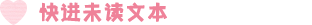
<style>
.page{position:relative;width:312px;height:25px;background:#ffffff}
.page>*{position:absolute;margin:0}
.t1{font:21.2px "shetumodengxiaofangti";color:#ef8299;font-weight:bold}
</style>
<div class="page">
<p class="t1" style="left:39px;top:2px;width:128px;height:20px">快进未读文本</p>
</div>
